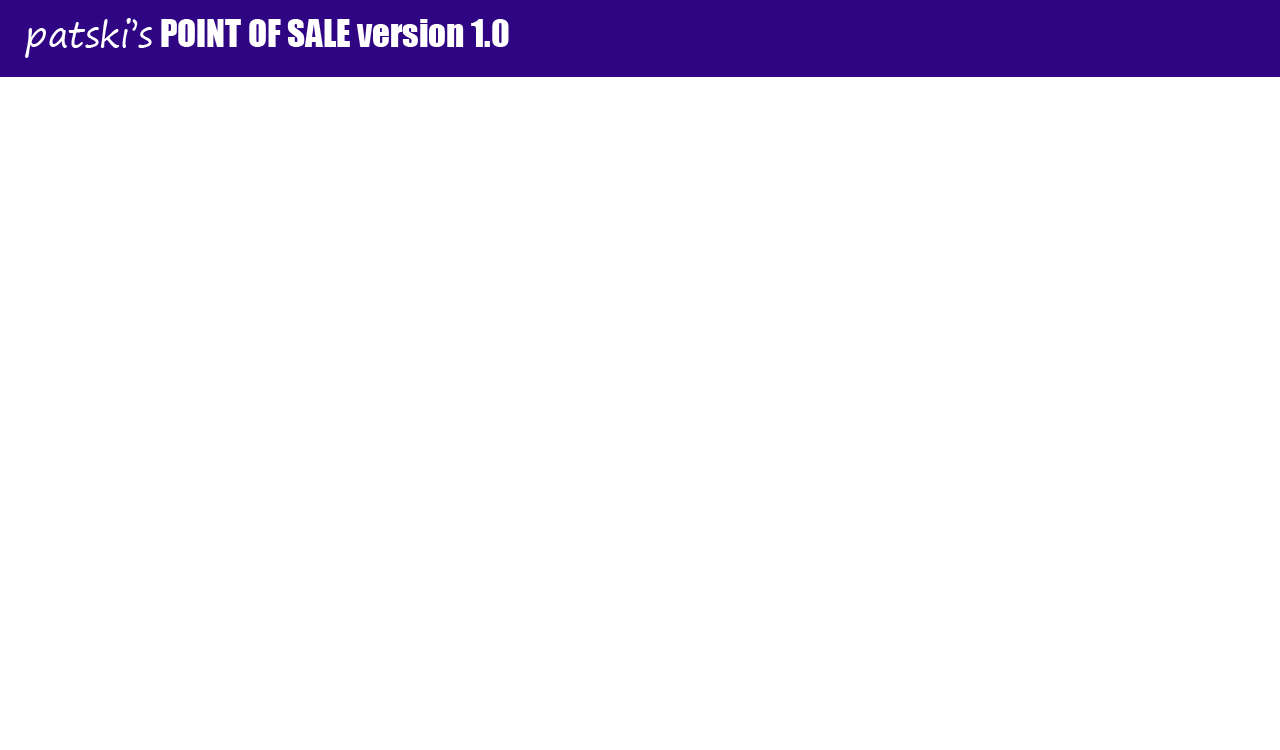
<style>
.page{position:relative;width:1280px;height:750px;background:#ffffff}
.page>*{position:absolute;margin:0}
.t1{font:35px "Impact";color:#ffffff}
.t2{font:35px "SegoePrint";color:#ffffff}
</style>
<div class="page">
<p class="t1" style="left:25px;top:18px;width:484px;height:40px"><span class="t2">patski’s</span> POINT OF SALE version 1.0</p>
</div>
